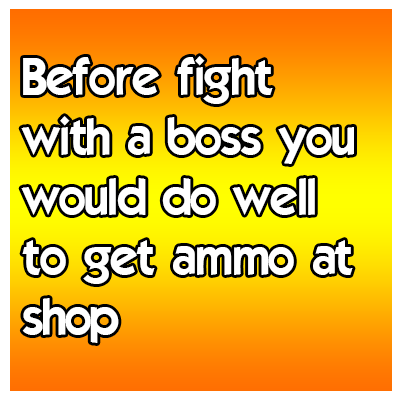
<style>
.page{position:relative;width:400px;height:400px}
.page>*{position:absolute;margin:0}
.t1{font:50px "ELEGANCE";color:#ffffff}
</style>
<div class="page">
<p class="t1" style="left:21px;top:56px;width:333px;height:287px">Before fight<br>with a boss you<br>would do well<br>to get ammo at <br>shop</p>
</div>
